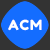
<style>
.page{position:relative;width:50px;height:50px;background:#146dff}
.page>*{position:absolute;margin:0}
.t1{font:14.1px "FredokaOne-Regular";letter-spacing:0.06em;color:#ffffff}
</style>
<div class="page">
<p class="t1" style="left:8px;top:19px;width:34px;height:12px">ACM</p>
</div>
